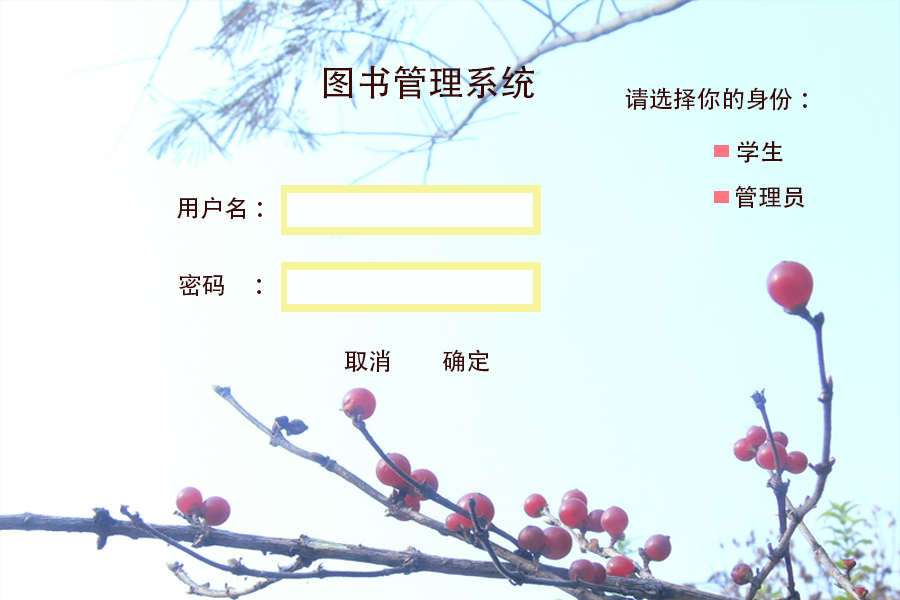
<style>
.page{position:relative;width:900px;height:600px}
.page>*{position:absolute;margin:0}
.t1{font:36px "AdobeHeitiStd-Regular";color:#3b0808}
.t2{font:24px "AdobeHeitiStd-Regular";color:#3b0808}
</style>
<div class="page">
<p class="t1" style="left:323px;top:65px;width:212px;height:34px">图书管理系统</p>
<p class="t2" style="left:625px;top:87px;width:182px;height:24px">请选择你的身份 ：</p>
<p class="t2" style="left:737px;top:140px;width:46px;height:23px">学生</p>
<p class="t2" style="left:735px;top:185px;width:70px;height:23px">管理员</p>
<p class="t2" style="left:177px;top:196px;width:85px;height:23px">用户名 ：</p>
<p class="t2" style="left:179px;top:274px;width:82px;height:22px">密码     ：</p>
<p class="t2" style="left:344px;top:349px;width:47px;height:23px">取消</p>
<p class="t2" style="left:442px;top:349px;width:48px;height:23px">确定</p>
</div>
